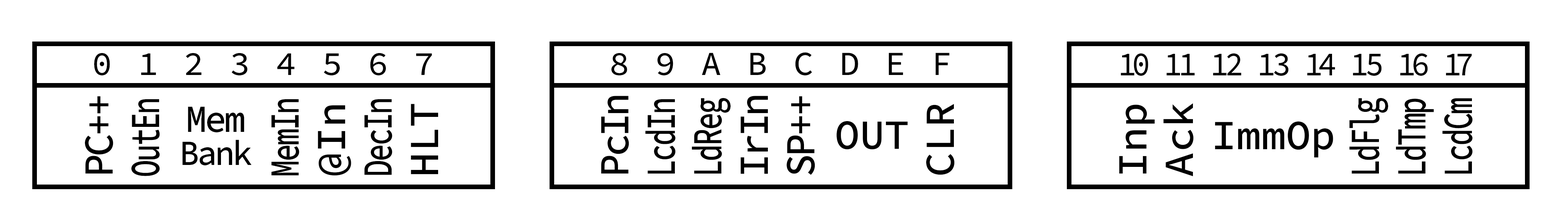
<style>
.page{position:relative;width:1568px;height:223px;background:#ffffff}
.page>*{position:absolute;margin:0}
.t1{font:33.8px "SourceCodeRoman_448.000wght";color:#000000}
.t2{font:33.8px "SourceCodeRoman_448.000wght";letter-spacing:-0.08em;color:#000000;scale:0.91 1}
.t3{font:41.5px/46.5px "SourceCodeRoman_499.000wght";letter-spacing:-0.06em;color:#000000;scale:0.7 1}
.t4{font:41.5px/46.5px "SourceCodeRoman_499.000wght";letter-spacing:-0.08em;color:#000000;scale:0.94 1}
.t5{font:41.5px/46.5px "SourceCodeRoman_499.000wght";color:#000000}
.t6{font:35.4px/33.1px "SourceCodeRoman_499.000wght";letter-spacing:-0.06em;color:#000000;scale:0.93 1}
.t7{font:38.4px/33.1px "SourceCodeRoman_499.000wght";letter-spacing:-0.06em;color:#000000;scale:0.93 1}
.t8{font:41.5px "SourceCodeRoman_499.000wght";color:#000000}
</style>
<div class="page">
<p class="t1" style="left:94px;top:53px;width:338px;height:22px">0 1 2 3 4 5 6 7</p>
<p class="t1" style="left:611px;top:52px;width:339px;height:23px">8 9 A B C D E F</p>
<p class="t2" style="left:1121px;top:53px;width:351px;height:23px">10 11 12 13 14 15 16 17</p>
<p class="t3" style="left:85px;top:96px;width:353px;height:80px;rotate:-90deg"><span class="t4">PC++<br></span>OutEn<br><br><br>MemIn<br><span class="t5">@In<br></span>DecIn<br><span class="t5">HLT</span></p>
<p class="t3" style="left:601px;top:96px;width:354px;height:79px;rotate:-90deg"><span class="t4">PcIn<br></span>LcdIn<br>LdReg<br><span class="t4">IrIn<br>SP++<br><br></span><span class="t5"><br>CLR</span></p>
<p class="t3" style="left:1119px;top:98px;width:354px;height:78px;rotate:-90deg"><span class="t5">Inp<br>Ack<br><br><br><br></span>LdFlg<br>LdTmp<br>LcdCm</p>
<p class="t6" style="left:183px;top:106px;width:69px;height:59px;text-align:center"><span class="t7">Mem<br></span>Bank</p>
<p class="t8" style="left:836px;top:121px;width:72px;height:28px">OUT</p>
<p class="t8" style="left:1215px;top:121px;width:118px;height:37px">ImmOp</p>
</div>
